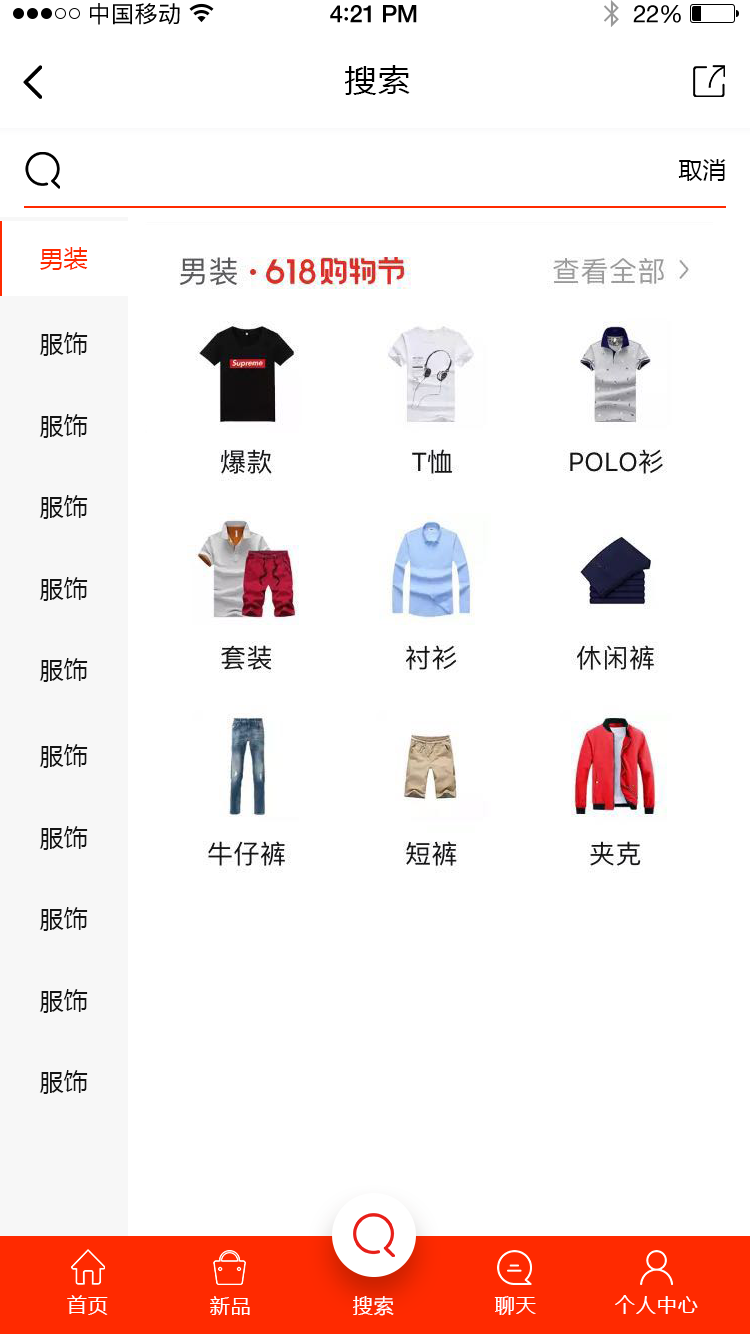
<style>
.page{position:relative;width:750px;height:1334px;background:#ffffff}
.page>*{position:absolute;margin:0}
.t1{font:23px "PingFangSC-Regular";letter-spacing:0.02em;color:#000000}
.t2{font:24px "HelveticaNeue-Medium";letter-spacing:-0.02em;color:#000000}
.t3{font:26px "Avenir-Medium";letter-spacing:-0.02em;color:#000000}
.t4{font:24px "HelveticaNeue";letter-spacing:-0.02em;color:#000000}
.t5{font:30px "MicrosoftYaHei";letter-spacing:0.05em;color:#000000;scale:1.06 1}
.t6{font:24px "MicrosoftYaHei";color:#000000;text-transform:uppercase}
.t7{font:24px "MicrosoftYaHei";color:#ff2a00;text-transform:uppercase}
.t8{font:24px "MicrosoftYaHei";color:#151515;text-transform:uppercase}
.t9{font:20px "MicrosoftYaHei";letter-spacing:0.05em;color:#ffffff;text-transform:uppercase}
</style>
<div class="page">
<p class="t1" style="left:90px;top:3px;width:90px;height:22px">中国移动</p>
<p class="t2" style="left:330px;top:5px;width:87px;height:18px">4<span class="t3">:</span>21 PM</p>
<p class="t4" style="left:633px;top:5px;width:48px;height:18px">22%</p>
<p class="t5" style="left:345px;top:65px;width:65px;height:30px">搜索</p>
<p class="t6" style="left:678px;top:159px;width:48px;height:22px">取消</p>
<p class="t7" style="left:40px;top:247px;width:48px;height:23px">男装</p>
<p class="t8" style="left:39px;top:332px;width:49px;height:24px">服饰</p>
<p class="t8" style="left:39px;top:414px;width:49px;height:24px">服饰</p>
<p class="t8" style="left:39px;top:495px;width:49px;height:24px">服饰</p>
<p class="t8" style="left:39px;top:577px;width:49px;height:24px">服饰</p>
<p class="t8" style="left:39px;top:658px;width:49px;height:24px">服饰</p>
<p class="t8" style="left:39px;top:744px;width:49px;height:24px">服饰</p>
<p class="t8" style="left:39px;top:826px;width:49px;height:24px">服饰</p>
<p class="t8" style="left:39px;top:907px;width:49px;height:24px">服饰</p>
<p class="t8" style="left:39px;top:989px;width:49px;height:24px">服饰</p>
<p class="t8" style="left:39px;top:1070px;width:49px;height:24px">服饰</p>
<p class="t9" style="left:67px;top:1295px;width:41px;height:20px">首页</p>
<p class="t9" style="left:210px;top:1296px;width:40px;height:19px">新品</p>
<p class="t9" style="left:353px;top:1296px;width:41px;height:20px">搜索</p>
<p class="t9" style="left:494px;top:1296px;width:42px;height:19px">聊天</p>
<p class="t9" style="left:615px;top:1295px;width:83px;height:19px">个人中心</p>
</div>
